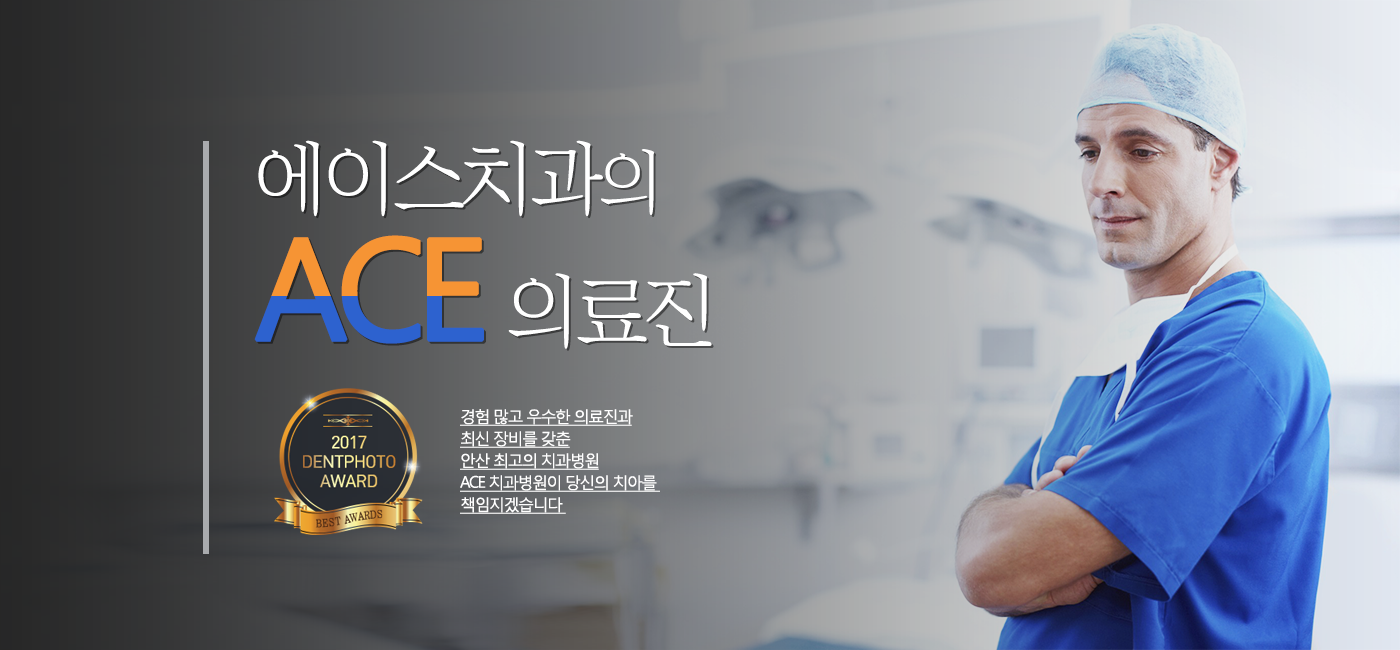
<style>
.page{position:relative;width:1400px;height:650px}
.page>*{position:absolute;margin:0}
.t1{font:80px/132.6px "ChosunilboNM";letter-spacing:-0.05em}
.t2{font:70px/132.6px "ChosunilboNM";letter-spacing:-0.05em}
.t3{font:140px/132.6px "MalgunGothicRegular";letter-spacing:-0.1em;font-weight:bold}
.t4{font:16.1px/22px "MalgunGothicRegular";letter-spacing:-0.1em;color:#ffffff;text-decoration:underline}
</style>
<div class="page">
<p class="t1" style="left:254px;top:140px;width:458px;height:209px">에이스치과<span class="t2">의<br></span><span class="t3">ACE </span>의료진</p>
<p class="t4" style="left:460px;top:409px;width:200px;height:105px">경험 많고 우수한 의료진과<br>최신 장비를 갖춘<br>안산 최고의 치과병원<br>ACE 치과병원이 당신의 치아를 <br>책임지겠습니다</p>
</div>
